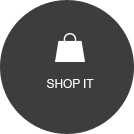
<style>
.page{position:relative;width:134px;height:134px;background:#3d3d3d}
.page>*{position:absolute;margin:0}
.t1{font:12px "ArialMT";letter-spacing:-0.01em;color:#ffffff;text-transform:uppercase}
</style>
<div class="page">
<p class="t1" style="left:47px;top:79px;width:47px;height:9px">shop it</p>
</div>
